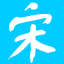
<style>
.page{position:relative;width:64px;height:64px;background:#00ccff}
.page>*{position:absolute;margin:0}
.t1{font:72px "FZSTK--GBK1-0";color:#ffffff}
</style>
<div class="page">
<p class="t1" style="left:8px;top:2px;width:48px;height:61px">宋</p>
</div>
